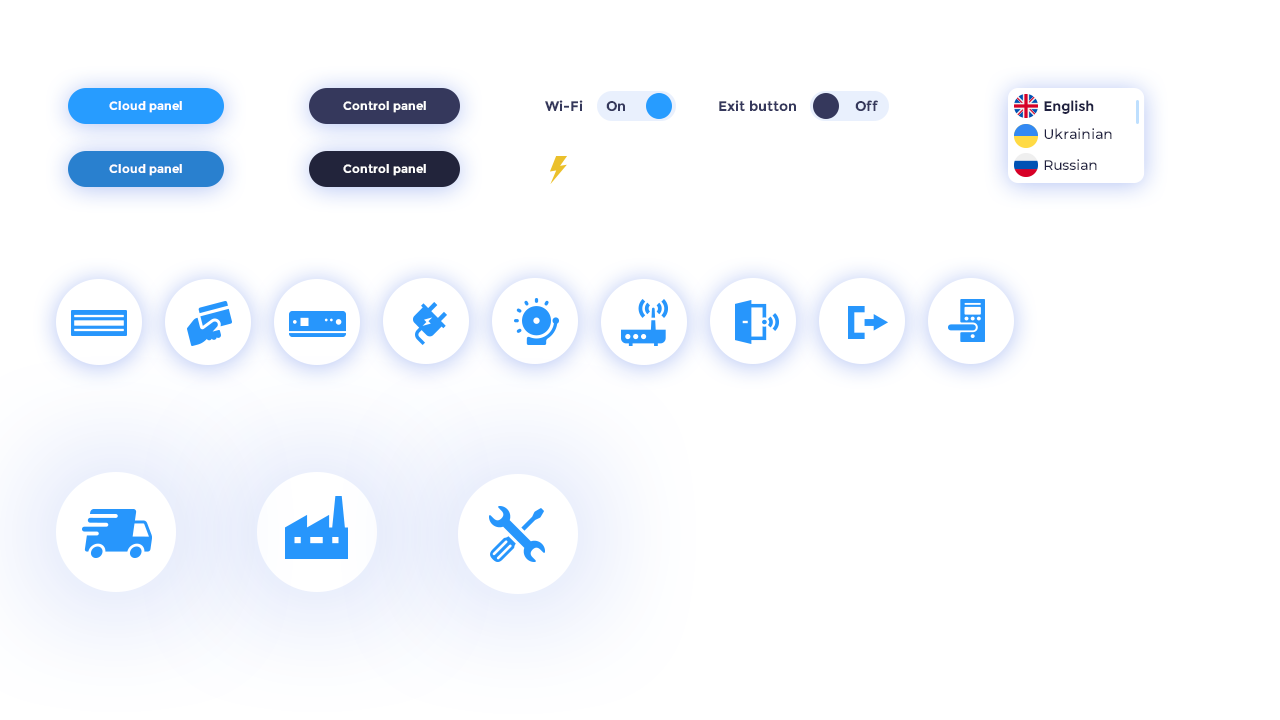
<style>
.page{position:relative;width:1280px;height:720px;background:#ffffff}
.page>*{position:absolute;margin:0}
.t1{font:12px "Montserrat-Bold";color:#ffffff}
.t2{font:14px "Montserrat-Bold";color:#35385c}
.t3{font:14px "Montserrat-Bold";color:#1f2040}
.t4{font:14px "Montserrat-Medium";color:#1f2040}
</style>
<div class="page">
<p class="t1" style="left:109px;top:101px;width:73px;height:12px">Cloud panel</p>
<p class="t1" style="left:343px;top:101px;width:83px;height:12px">Control panel</p>
<p class="t2" style="left:545px;top:100px;width:38px;height:11px">Wi-Fi</p>
<p class="t2" style="left:606px;top:101px;width:19px;height:10px">On</p>
<p class="t2" style="left:719px;top:100px;width:77px;height:11px">Exit button</p>
<p class="t2" style="left:855px;top:100px;width:23px;height:11px">Off</p>
<p class="t3" style="left:1044px;top:100px;width:50px;height:14px">English</p>
<p class="t4" style="left:1044px;top:128px;width:68px;height:11px">Ukrainian</p>
<p class="t4" style="left:1044px;top:159px;width:53px;height:11px">Russian</p>
<p class="t1" style="left:109px;top:164px;width:73px;height:12px">Cloud panel</p>
<p class="t1" style="left:343px;top:164px;width:83px;height:12px">Control panel</p>
</div>
